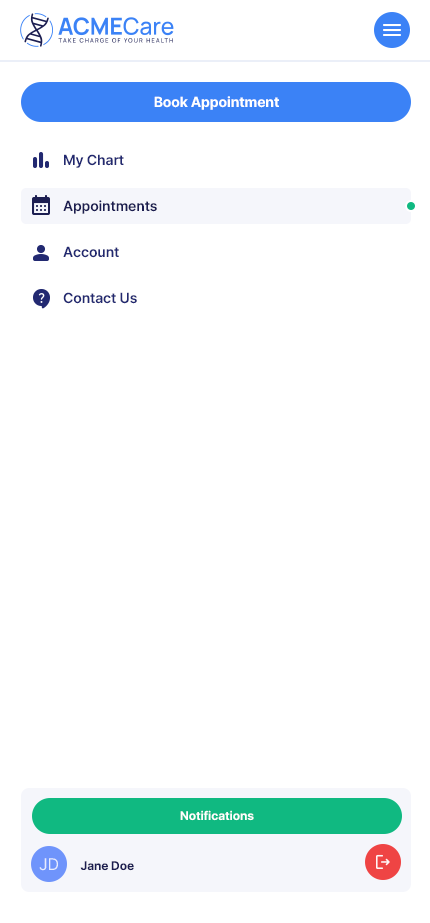
<style>
.page{position:relative;width:430px;height:923px;background:#ffffff}
.page>*{position:absolute;margin:0}
.t1{font:14px "Inter-Bold";letter-spacing:-0.01em;color:#ffffff}
.t2{font:14px "Inter-SemiBold";letter-spacing:-0.01em;color:#222971}
.t3{font:14px "Inter-SemiBold";letter-spacing:-0.01em;color:#1c1e51}
.t4{font:12px "Inter-Bold";letter-spacing:-0.01em;color:#ffffff}
.t5{font:16px "Inter-Regular";letter-spacing:-0.01em;color:#ffffff}
.t6{font:12px "Inter-Bold";letter-spacing:-0.01em;color:#1c1e51}
</style>
<div class="page">
<p class="t1" style="left:154px;top:96px;width:125px;height:14px">Book Appointment</p>
<p class="t2" style="left:64px;top:154px;width:60px;height:14px">My Chart</p>
<p class="t3" style="left:63px;top:200px;width:94px;height:14px">Appointments</p>
<p class="t2" style="left:63px;top:246px;width:56px;height:12px">Account</p>
<p class="t2" style="left:63px;top:292px;width:74px;height:12px">Contact Us</p>
<p class="t4" style="left:180px;top:810px;width:74px;height:11px">Notifications</p>
<p class="t5" style="left:39px;top:858px;width:19px;height:13px;opacity:0.8">JD</p>
<p class="t6" style="left:80px;top:861px;width:54px;height:10px">Jane Doe</p>
</div>
